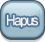
<style>
.page{position:relative;width:45px;height:42px}
.page>*{position:absolute;margin:0}
.t1{font:13px "GothicMB101Pro-Medium";letter-spacing:-0.12em;color:#fff6f2;scale:0.8 1}
</style>
<div class="page">
<p class="t1" style="left:7px;top:15px;width:31px;height:12px">Hapus</p>
</div>
